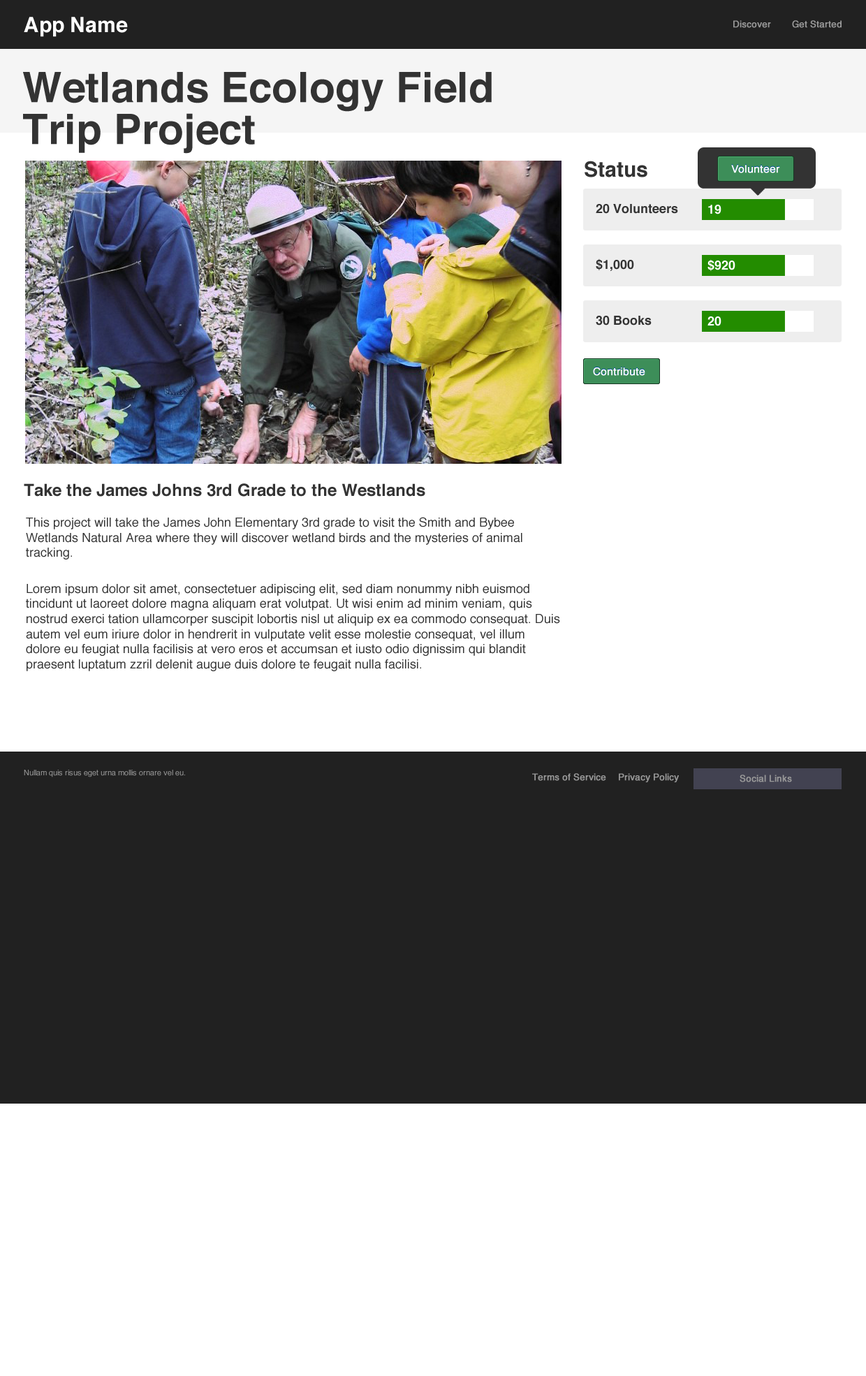
<style>
.page{position:relative;width:866px;height:1376px;background:#ffffff}
.page>*{position:absolute;margin:0}
.t1{font:21px "Helvetica-Bold";color:#ffffff}
.t2{font:9.1px "Helvetica";color:#999999;font-weight:bold}
.t3{font:41.9px/41.9px "Helvetica-Bold";color:#333333}
.t4{font:21px "Helvetica-Bold";color:#333333}
.t5{font:10.5px "Helvetica";color:#ffffff;font-weight:bold}
.t6{font:12.6px "Helvetica-Bold";color:#333333}
.t7{font:12.6px "Helvetica-Bold";color:#ffffff}
.t8{font:16.8px "Helvetica-Bold";color:#333333}
.t9{font:12.6px/15.1px "Helvetica";color:#333333}
.t10{font:7.7px "Helvetica";color:#999999}
</style>
<div class="page">
<p class="t1" style="left:24px;top:17px;width:104px;height:20px">App Name</p>
<p class="t2" style="left:734px;top:20px;width:37px;height:8px">Discover</p>
<p class="t2" style="left:792px;top:20px;width:50px;height:8px">Get Started</p>
<p class="t3" style="left:23px;top:72px;width:469px;height:82px">Wetlands Ecology Field Trip Project</p>
<p class="t4" style="left:585px;top:161px;width:63px;height:16px">Status</p>
<p class="t5" style="left:732px;top:165px;width:48px;height:8px">Volunteer</p>
<p class="t6" style="left:596px;top:204px;width:82px;height:10px">20 Volunteers</p>
<p class="t7" style="left:708px;top:205px;width:14px;height:9px">19</p>
<p class="t6" style="left:596px;top:259px;width:38px;height:12px">$1,000</p>
<p class="t7" style="left:708px;top:259px;width:28px;height:12px">$920</p>
<p class="t6" style="left:596px;top:316px;width:56px;height:10px">30 Books</p>
<p class="t7" style="left:708px;top:316px;width:14px;height:10px">20</p>
<p class="t5" style="left:593px;top:368px;width:53px;height:8px">Contribute</p>
<p class="t8" style="left:24px;top:483px;width:401px;height:14px">Take the James Johns 3rd Grade to the Westlands</p>
<p class="t9" style="left:26px;top:517px;width:534px;height:154px">This project will take the James John Elementary 3rd grade to visit the Smith and Bybee Wetlands Natural Area where they will discover wetland birds and the mysteries of animal tracking.<br>Lorem ipsum dolor sit amet, consectetuer adipiscing elit, sed diam nonummy nibh euismod tincidunt ut laoreet dolore magna aliquam erat volutpat. Ut wisi enim ad minim veniam, quis nostrud exerci tation ullamcorper suscipit lobortis nisl ut aliquip ex ea commodo consequat. Duis autem vel eum iriure dolor in hendrerit in vulputate velit esse molestie consequat, vel illum dolore eu feugiat nulla facilisis at vero eros et accumsan et iusto odio dignissim qui blandit praesent luptatum zzril delenit augue duis dolore te feugait nulla facilisi.</p>
<p class="t10" style="left:24px;top:770px;width:161px;height:8px">Nullam quis risus eget urna mollis ornare vel eu.</p>
<p class="t2" style="left:532px;top:773px;width:74px;height:8px">Terms of Service</p>
<p class="t2" style="left:619px;top:773px;width:60px;height:10px">Privacy Policy</p>
<p class="t2" style="left:740px;top:775px;width:52px;height:8px">Social Links</p>
</div>
